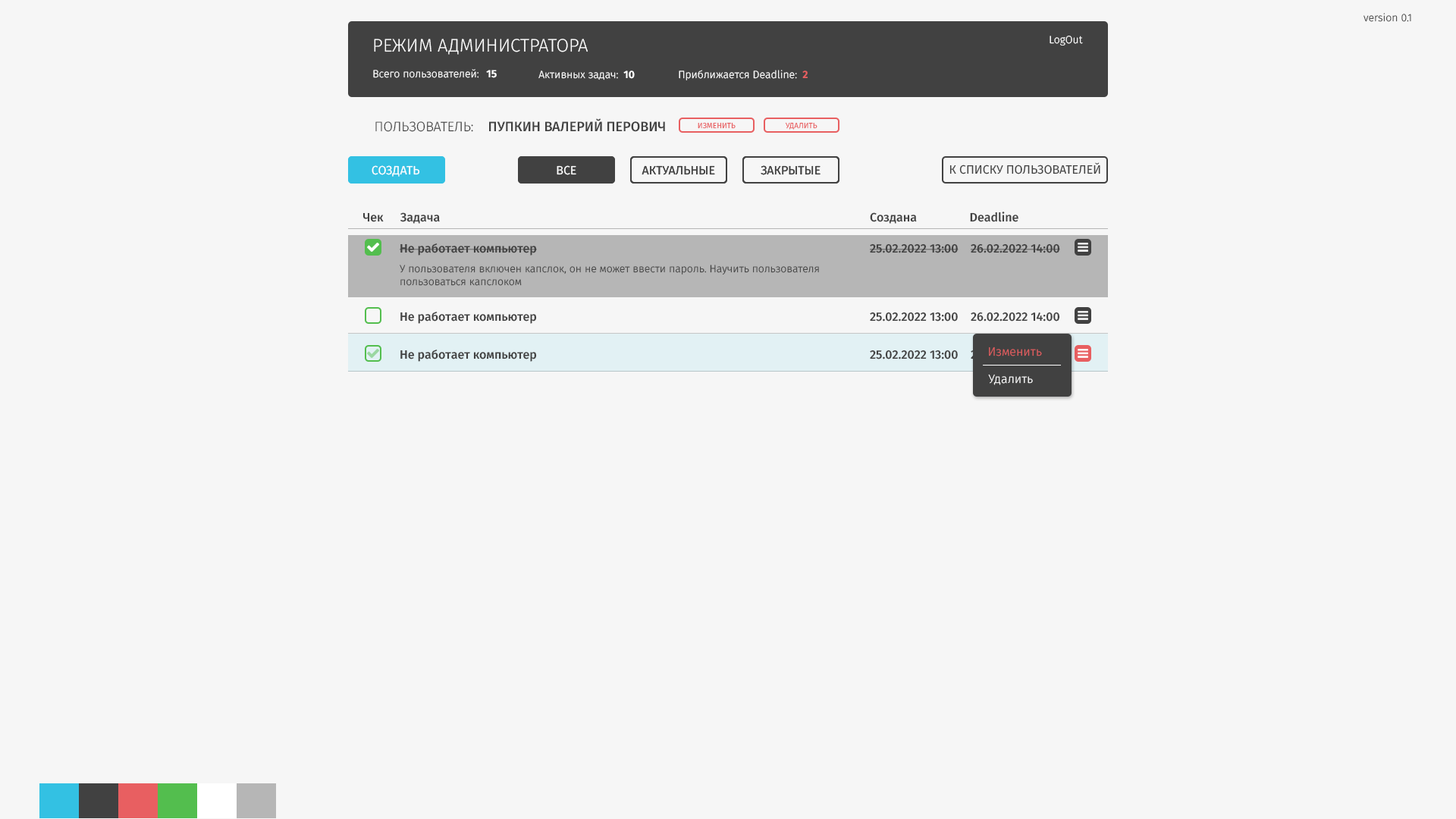
<style>
.page{position:relative;width:1456px;height:819px;background:#f6f6f6}
.page>*{position:absolute;margin:0}
.t1{font:10.6px "FiraSans-Light";color:#414141}
.t2{font:18.2px "FiraSans-Light";color:#ffffff;text-transform:uppercase}
.t3{font:10.6px "FiraSans-Light";color:#ffffff}
.t4{font:10.6px "FiraSans-Bold";color:#ffffff}
.t5{font:10.6px "FiraSans-Bold";color:#e85f61}
.t6{font:13.6px "FiraSans-Light";color:#414141;text-transform:uppercase}
.t7{font:13.6px "FiraSans-Medium";color:#414141;text-transform:uppercase}
.t8{font:7.6px "FiraSans-Regular";color:#e85f61;text-transform:uppercase}
.t9{font:12.1px "FiraSans-Regular";color:#ffffff;text-transform:uppercase}
.t10{font:12.1px "FiraSans-Regular";color:#414141;text-transform:uppercase}
.t11{font:12.1px "FiraSans-Medium";color:#414141}
.t12{font:12.1px "FiraSans-Light";color:#e85f61}
.t13{font:12.1px "FiraSans-Light";color:#ffffff}
</style>
<div class="page">
<p class="t1" style="left:1363px;top:13px;width:48px;height:9px">version 0.1</p>
<p class="t2" style="left:374px;top:39px;width:214px;height:16px">Режим администратора</p>
<p class="t3" style="left:1050px;top:36px;width:33px;height:9px">LogOut</p>
<p class="t3" style="left:373px;top:69px;width:106px;height:9px">Всего пользователей:</p>
<p class="t4" style="left:486px;top:70px;width:11px;height:8px">15</p>
<p class="t3" style="left:538px;top:71px;width:80px;height:9px">Активных задач:</p>
<p class="t4" style="left:623px;top:71px;width:12px;height:8px">10</p>
<p class="t3" style="left:679px;top:70px;width:118px;height:10px">Приближается Deadline:</p>
<p class="t5" style="left:802px;top:71px;width:6px;height:7px">2</p>
<p class="t6" style="left:375px;top:121px;width:98px;height:11px">Пользователь:</p>
<p class="t7" style="left:489px;top:118px;width:176px;height:14px">Пупкин Валерий Перович</p>
<p class="t8" style="left:698px;top:122px;width:38px;height:7px">Изменить</p>
<p class="t8" style="left:785px;top:122px;width:32px;height:8px">Удалить</p>
<p class="t9" style="left:372px;top:165px;width:48px;height:12px">Создать</p>
<p class="t9" style="left:372px;top:165px;width:48px;height:12px">Создать</p>
<p class="t9" style="left:557px;top:165px;width:19px;height:10px">Все</p>
<p class="t9" style="left:557px;top:165px;width:19px;height:10px">Все</p>
<p class="t10" style="left:642px;top:165px;width:73px;height:10px">Актуальные</p>
<p class="t10" style="left:642px;top:165px;width:73px;height:10px">Актуальные</p>
<p class="t10" style="left:761px;top:165px;width:60px;height:10px">Закрытые</p>
<p class="t10" style="left:761px;top:165px;width:60px;height:10px">Закрытые</p>
<p class="t10" style="left:949px;top:162px;width:151px;height:12px">К списку пользователей</p>
<p class="t11" style="left:362px;top:212px;width:22px;height:10px">Чек</p>
<p class="t11" style="left:400px;top:212px;width:40px;height:12px">Задача</p>
<p class="t11" style="left:870px;top:212px;width:47px;height:12px">Создана</p>
<p class="t11" style="left:970px;top:212px;width:48px;height:10px">Deadline</p>
<p class="t11" style="left:400px;top:243px;width:137px;height:13px">Не работает компьютер</p>
<p class="t11" style="left:870px;top:243px;width:89px;height:10px">25.02.2022 13:00</p>
<p class="t11" style="left:971px;top:243px;width:89px;height:10px">26.02.2022 14:00</p>
<p class="t1" style="left:400px;top:265px;width:419px;height:21px">У пользователя включен капслок, он не может ввести пароль. Научить пользователя пользоваться капслоком</p>
<p class="t11" style="left:400px;top:312px;width:137px;height:12px">Не работает компьютер</p>
<p class="t11" style="left:870px;top:312px;width:88px;height:10px">25.02.2022 13:00</p>
<p class="t11" style="left:971px;top:312px;width:89px;height:10px">26.02.2022 14:00</p>
<p class="t11" style="left:400px;top:350px;width:137px;height:12px">Не работает компьютер</p>
<p class="t11" style="left:870px;top:350px;width:88px;height:9px">25.02.2022 13:00</p>
<p class="t12" style="left:989px;top:347px;width:53px;height:9px">Изменить</p>
<p class="t13" style="left:988px;top:374px;width:45px;height:11px">Удалить</p>
</div>
